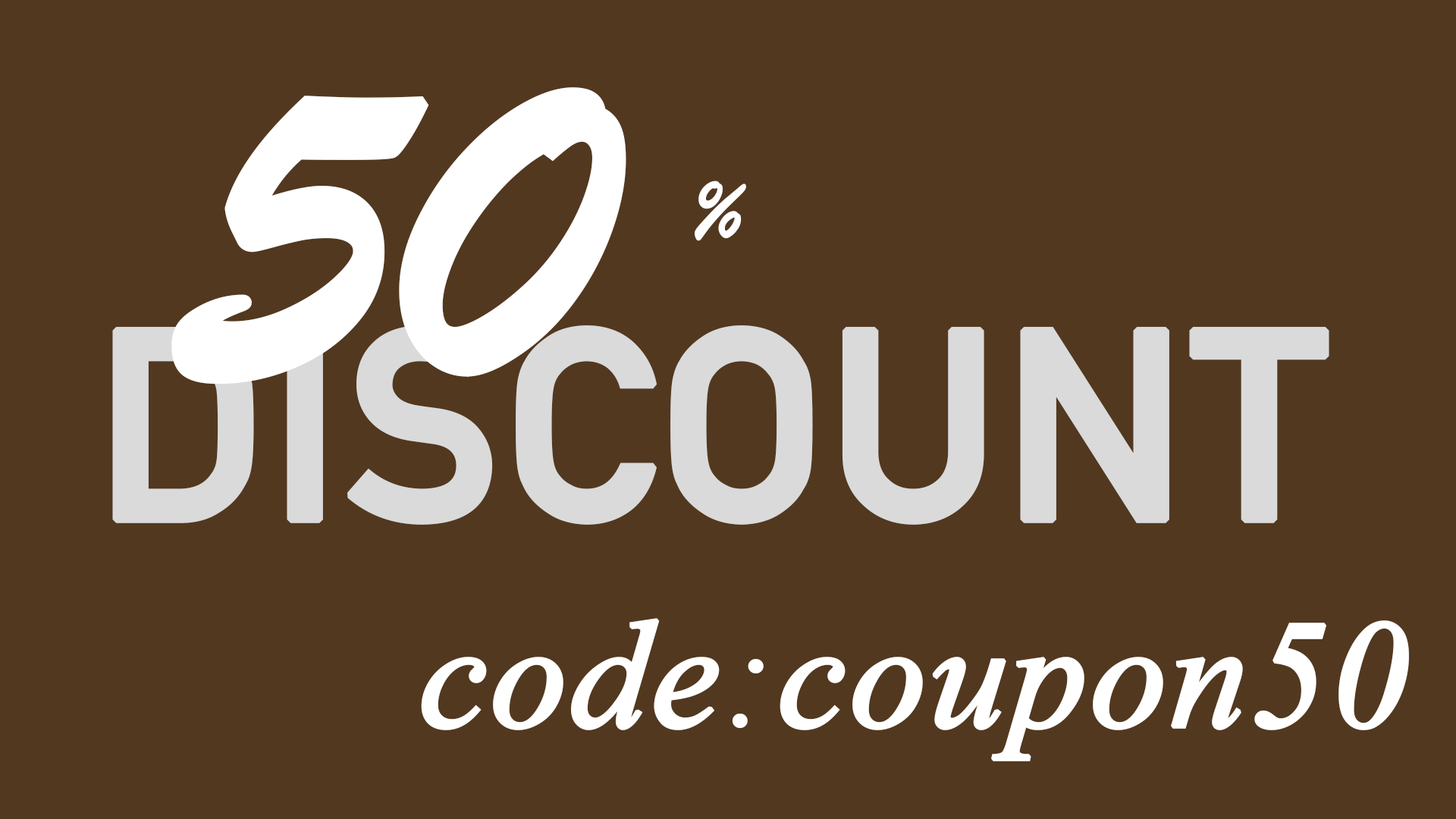
<style>
.page{position:relative;width:1456px;height:819px;background:#52381f}
.page>*{position:absolute;margin:0}
.t1{font:455px "BrushScriptMT";color:#ffffff;font-weight:bold}
.t2{font:91px "BrushScriptMT";color:#ffffff;font-weight:bold}
.t3{font:265.4px "DINAlternate-Bold";color:#dadada;font-weight:bold}
.t4{font:152.4px "TimesNewRomanPS-ItalicMT";color:#ffffff;font-weight:bold}
</style>
<div class="page">
<p class="t1" style="left:171px;top:87px;width:455px;height:297px">50</p>
<p class="t2" style="left:694px;top:180px;width:52px;height:61px">%</p>
<p class="t3" style="left:112px;top:325px;width:1217px;height:200px">DISCOUNT</p>
<p class="t4" style="left:421px;top:618px;width:988px;height:143px">code:coupon50</p>
</div>
